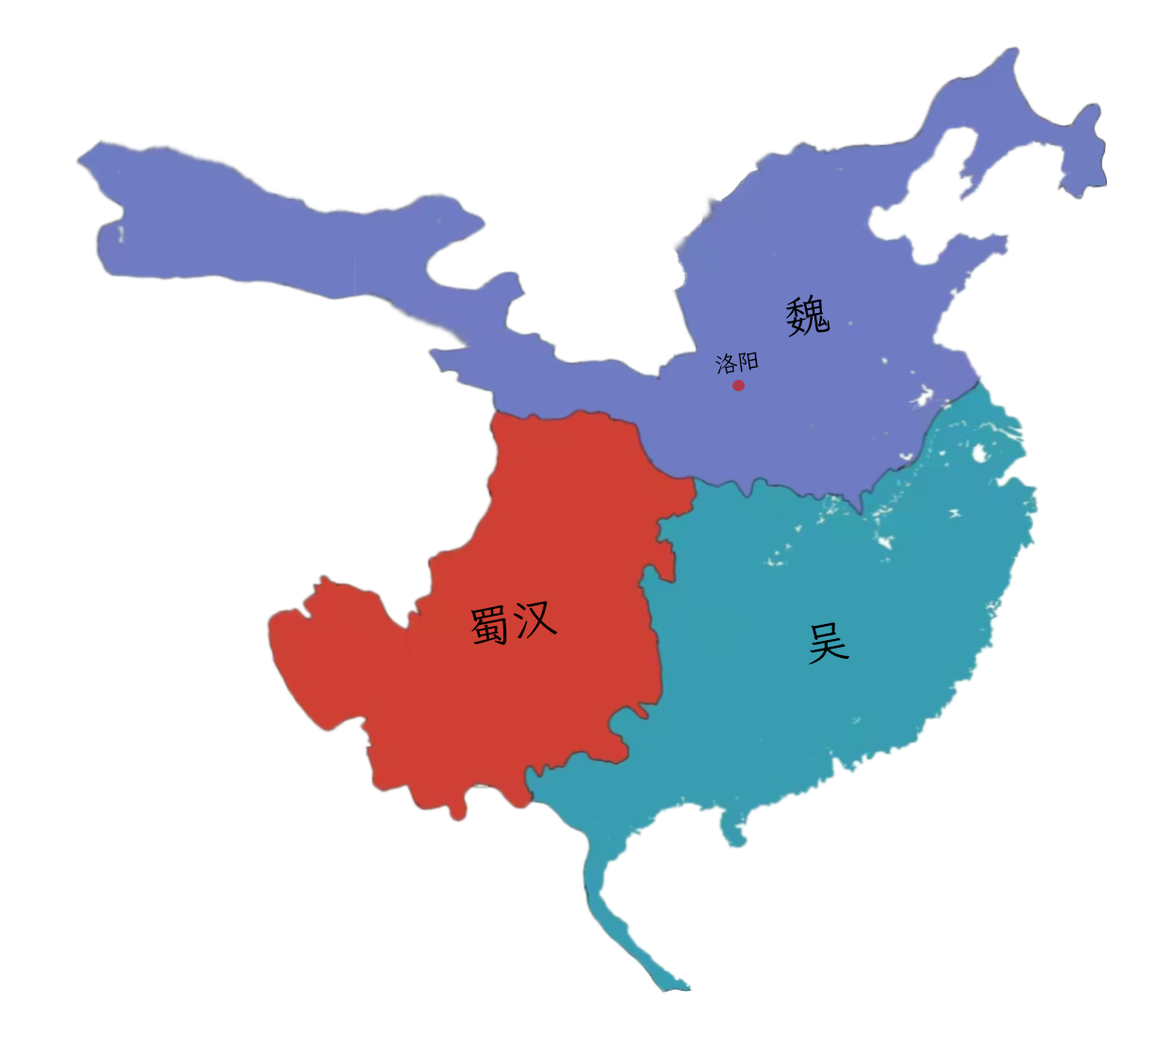
<style>
.page{position:relative;width:1150px;height:1037px;background:#ffffff}
.page>*{position:absolute;margin:0}
.t1{font:45.2px "QiushuiShotai-Bright";color:#000000}
.t2{font:22.6px "QiushuiShotai-Bright";color:#000000}
</style>
<div class="page">
<p class="t1" style="left:785px;top:294px;width:45px;height:43px;rotate:-8deg">魏</p>
<p class="t2" style="left:715px;top:352px;width:44px;height:22px;rotate:-8deg">洛阳</p>
<p class="t1" style="left:470px;top:600px;width:88px;height:45px;rotate:-8deg">蜀汉</p>
<p class="t1" style="left:809px;top:622px;width:40px;height:43px;rotate:-8deg">吴</p>
</div>
